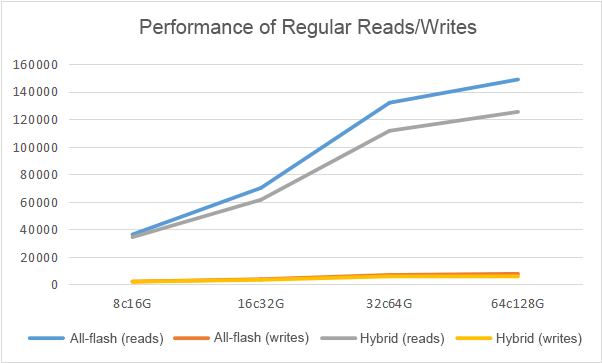
<style>
.page{position:relative;width:602px;height:363px;background:#ffffff}
.page>*{position:absolute;margin:0}
.t1{font:20px "ArialMT";color:#595959}
.t2{font:13.3px "ArialMT";color:#595959}
</style>
<div class="page">
<p class="t1" style="left:140px;top:19px;width:337px;height:19px">Performance of Regular Reads/Writes</p>
<p class="t2" style="left:70px;top:333px;width:93px;height:13px">All-flash (reads)</p>
<p class="t2" style="left:214px;top:332px;width:95px;height:13px">All-flash (writes)</p>
<p class="t2" style="left:360px;top:333px;width:84px;height:13px">Hybrid (reads)</p>
<p class="t2" style="left:496px;top:333px;width:86px;height:13px">Hybrid (writes)</p>
</div>
